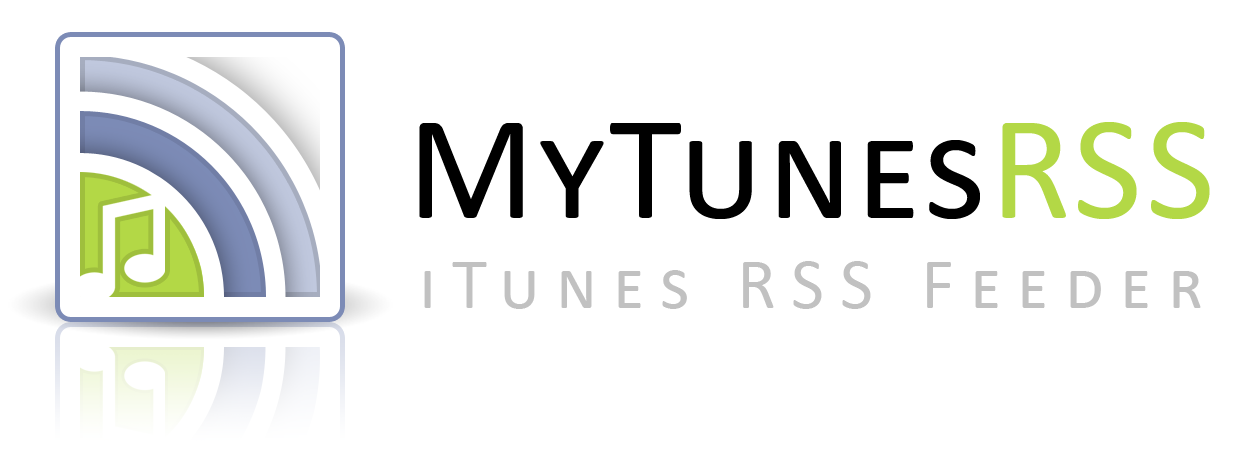
<style>
.page{position:relative;width:1254px;height:462px;background:#ffffff}
.page>*{position:absolute;margin:0}
.t1{font:72px/90px "Calibri";letter-spacing:0.22em;color:#c1c1c1;font-variant:small-caps}
.t2{font:150px/90px "Calibri";letter-spacing:0.025em;color:#000000;font-variant:small-caps}
.t3{font:150px/90px "Calibri";letter-spacing:0.025em;color:#b3d846;font-variant:small-caps}
</style>
<div class="page">
<p class="t1" style="left:419px;top:122px;width:791px;height:187px;text-align:center"><span class="t2">MyTunes</span><span class="t3">RSS<br></span>iTunes RSS Feeder</p>
</div>
